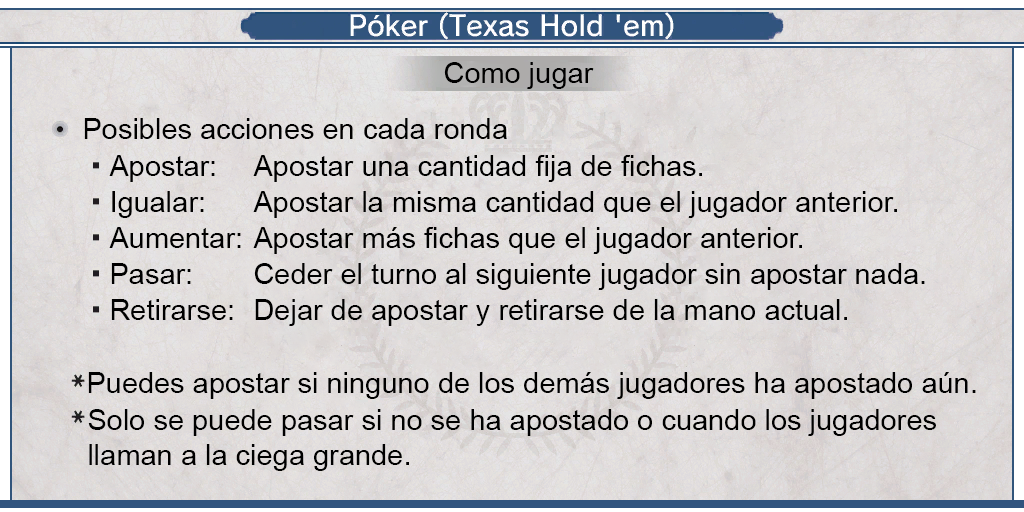
<style>
.page{position:relative;width:1024px;height:512px}
.page>*{position:absolute;margin:0}
.t1{font:29px "ArialMT";color:#000000}
.t2{font:29px/36px "ArialMT";color:#000000}
.t3{font:29px/35px "ArialMT";color:#000000}
</style>
<div class="page">
<p class="t1" style="left:444px;top:62px;width:150px;height:27px">Como jugar</p>
<p class="t1" style="left:84px;top:118px;width:423px;height:21px">Posibles acciones en cada ronda</p>
<p class="t2" style="left:109px;top:155px;width:132px;height:165px">Apostar:<br>Igualar:<br>Aumentar:<br>Pasar:<br>Retirarse:</p>
<p class="t2" style="left:253px;top:155px;width:672px;height:171px">Apostar una cantidad fija de fichas.<br>Apostar la misma cantidad que el jugador anterior.<br>Apostar más fichas que el jugador anterior.<br>Ceder el turno al siguiente jugador sin apostar nada.<br>Dejar de apostar y retirarse de la mano actual.</p>
<p class="t1" style="left:88px;top:372px;width:888px;height:27px">Puedes apostar si ninguno de los demás jugadores ha apostado aún.</p>
<p class="t3" style="left:88px;top:409px;width:848px;height:62px">Solo se puede pasar si no se ha apostado o cuando los jugadores <br>llaman a la ciega grande.</p>
</div>
